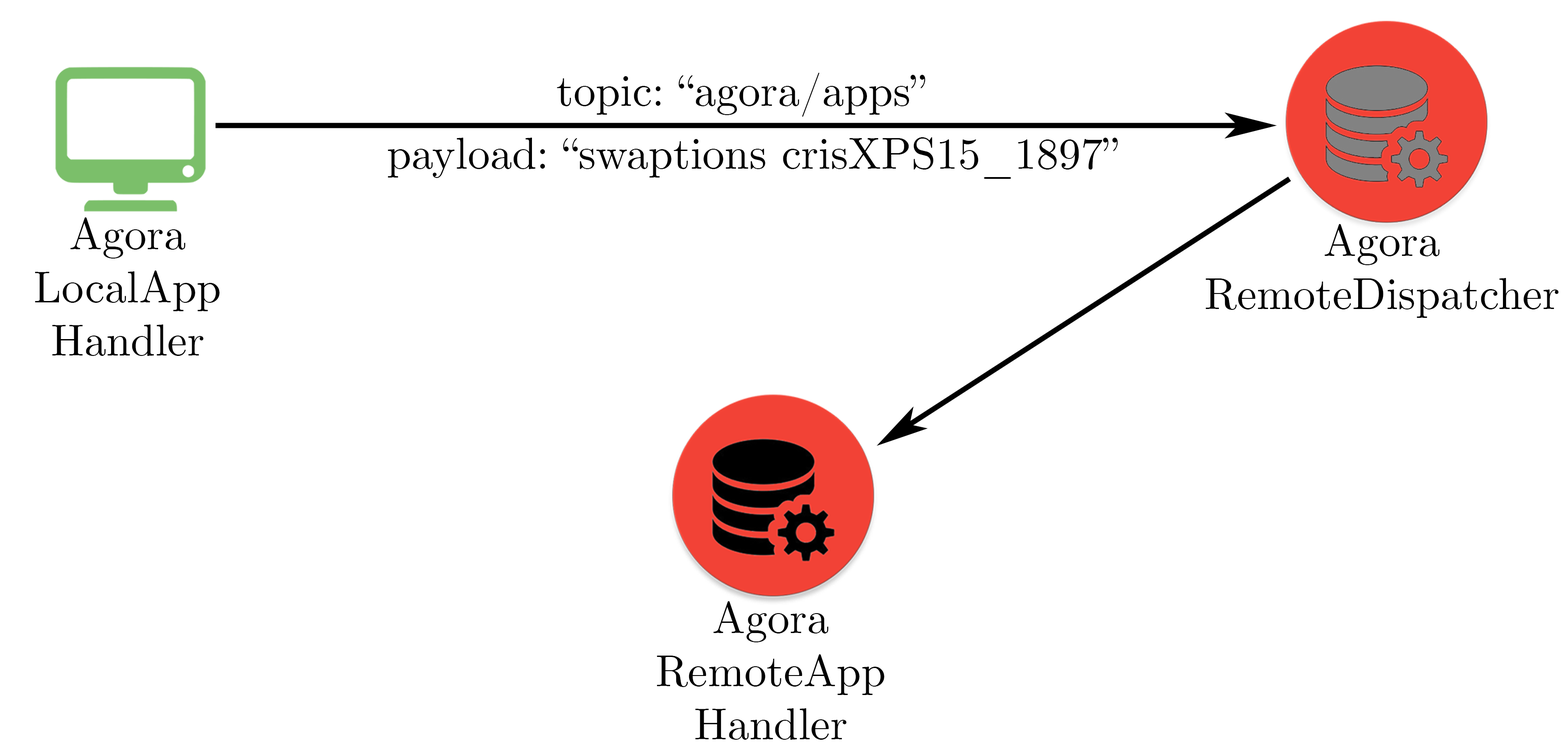
<style>
.page{position:relative;width:1568px;height:753px;background:#ffffff}
.page>*{position:absolute;margin:0}
.t1{font:44.3px "CMUSerif-Roman";color:#000000}
</style>
<div class="page">
<p class="t1" style="left:557px;top:73px;width:368px;height:44px">topic: “agora/apps”</p>
<p class="t1" style="left:388px;top:137px;width:730px;height:42px">payload: “swaptions crisXPS15_1897”</p>
<p class="t1" style="left:35px;top:217px;width:185px;height:139px;text-align:center">Agora<br>LocalApp<br>Handler</p>
<p class="t1" style="left:1206px;top:224px;width:353px;height:94px;text-align:center">Agora<br>RemoteDispatcher</p>
<p class="t1" style="left:657px;top:601px;width:227px;height:139px;text-align:center">Agora<br>RemoteApp<br>Handler</p>
</div>
